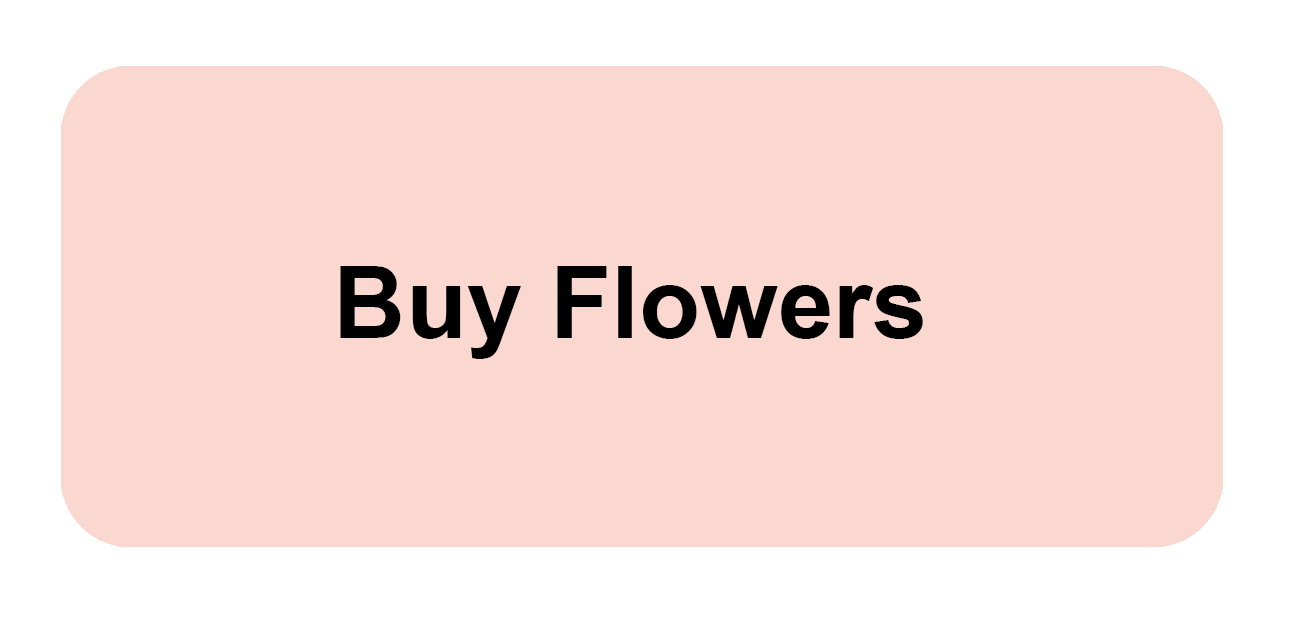
<style>
.page{position:relative;width:1307px;height:618px;background:#fad7cf}
.page>*{position:absolute;margin:0}
.t1{font:100px "Arial-BoldMT";color:#000000}
</style>
<div class="page">
<p class="t1" style="left:340px;top:266px;width:583px;height:93px">Buy Flowers</p>
</div>
